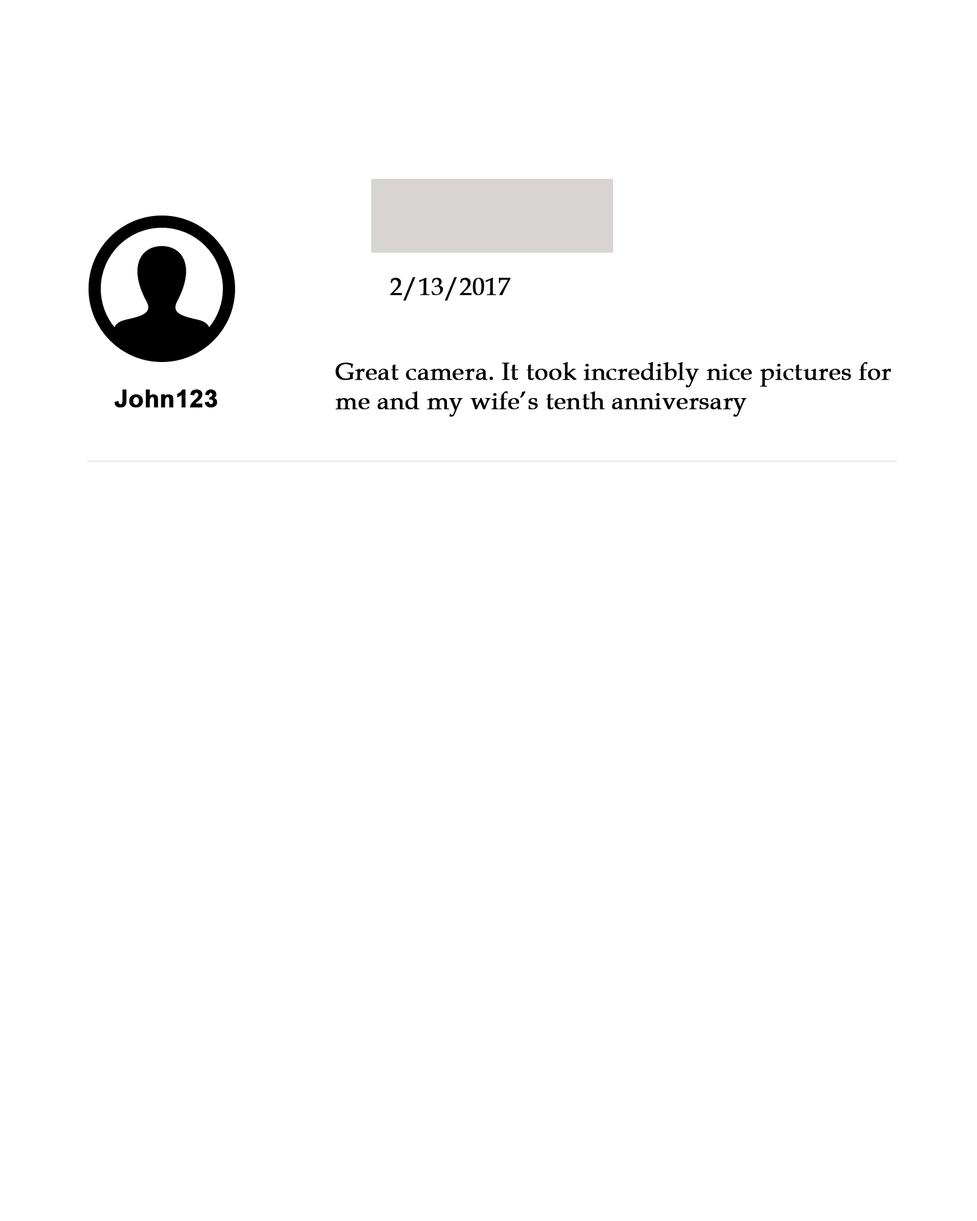
<style>
.page{position:relative;width:977px;height:1221px;background:#ffffff}
.page>*{position:absolute;margin:0}
.t1{font:24.4px "BookAntiqua";color:#000000;font-weight:bold}
.t2{font:24.4px "Arial-BoldMT";color:#000000;font-weight:bold}
</style>
<div class="page">
<p class="t1" style="left:389px;top:277px;width:121px;height:24px">2/13/2017</p>
<p class="t1" style="left:335px;top:362px;width:556px;height:55px">Great camera. It took incredibly nice pictures for <br>me and my wife’s tenth anniversary</p>
<p class="t2" style="left:114px;top:389px;width:103px;height:19px">John123</p>
</div>
